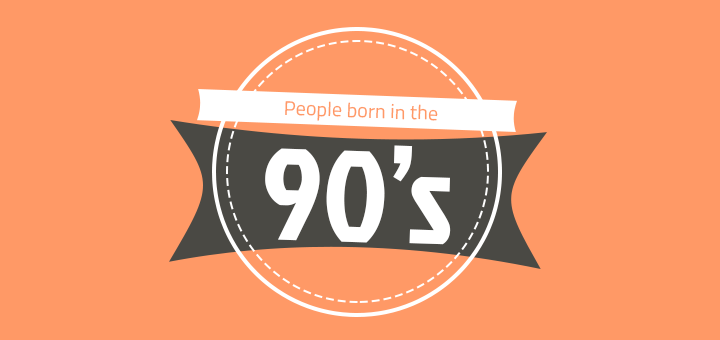
<style>
.page{position:relative;width:720px;height:340px;background:#ff9966}
.page>*{position:absolute;margin:0}
.t1{font:20px "TitilliumWeb-Regular";letter-spacing:0.005em;color:#ff9966}
.t2{font:130px "JockeyOne-Regular";letter-spacing:0.005em;color:#ffffff}
</style>
<div class="page">
<p class="t1" style="left:285px;top:101px;width:153px;height:20px;rotate:5deg">People born in the</p>
<p class="t1" style="left:285px;top:101px;width:153px;height:20px;rotate:5deg">People born in the</p>
<p class="t1" style="left:285px;top:101px;width:153px;height:20px;rotate:5deg">People born in the</p>
<p class="t2" style="left:263px;top:142px;width:189px;height:104px;rotate:-3deg">40’s</p>
<p class="t2" style="left:265px;top:145px;width:186px;height:100px;rotate:2deg">90’s</p>
<p class="t2" style="left:266px;top:142px;width:189px;height:105px;rotate:-3deg">60’s</p>
<p class="t2" style="left:266px;top:142px;width:190px;height:105px;rotate:-3deg">80’s</p>
<p class="t2" style="left:267px;top:145px;width:181px;height:100px;rotate:2deg">50’s</p>
</div>
